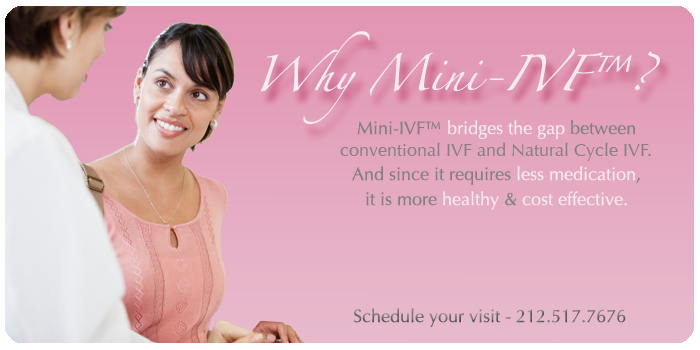
<style>
.page{position:relative;width:700px;height:350px}
.page>*{position:absolute;margin:0}
.t1{font:32px "Zapfino";color:#f6ecf0}
.t2{font:18px "Optima-Regular";color:#f6ecf0}
.t3{font:18px "Optima-Regular";color:#818181}
.t4{font:18px "Optima-Regular";color:#6d6d6d}
</style>
<div class="page">
<p class="t1" style="left:260px;top:31px;width:400px;height:93px">Why Mini-IVF™?</p>
<p class="t2" style="left:357px;top:120px;width:278px;height:19px"><span class="t3">Mini-IVF™</span> bridges the gap<span class="t3"> between</span></p>
<p class="t3" style="left:340px;top:142px;width:311px;height:19px">conventional IVF and Natural Cycle IVF.</p>
<p class="t3" style="left:352px;top:166px;width:288px;height:19px">And since it requires <span class="t2">less medication</span>,</p>
<p class="t2" style="left:366px;top:191px;width:261px;height:19px"><span class="t3">it is more </span>healthy<span class="t3"> &amp; </span>cost effective.</p>
<p class="t4" style="left:353px;top:308px;width:273px;height:19px">Schedule your visit - 212.517.7676</p>
</div>
